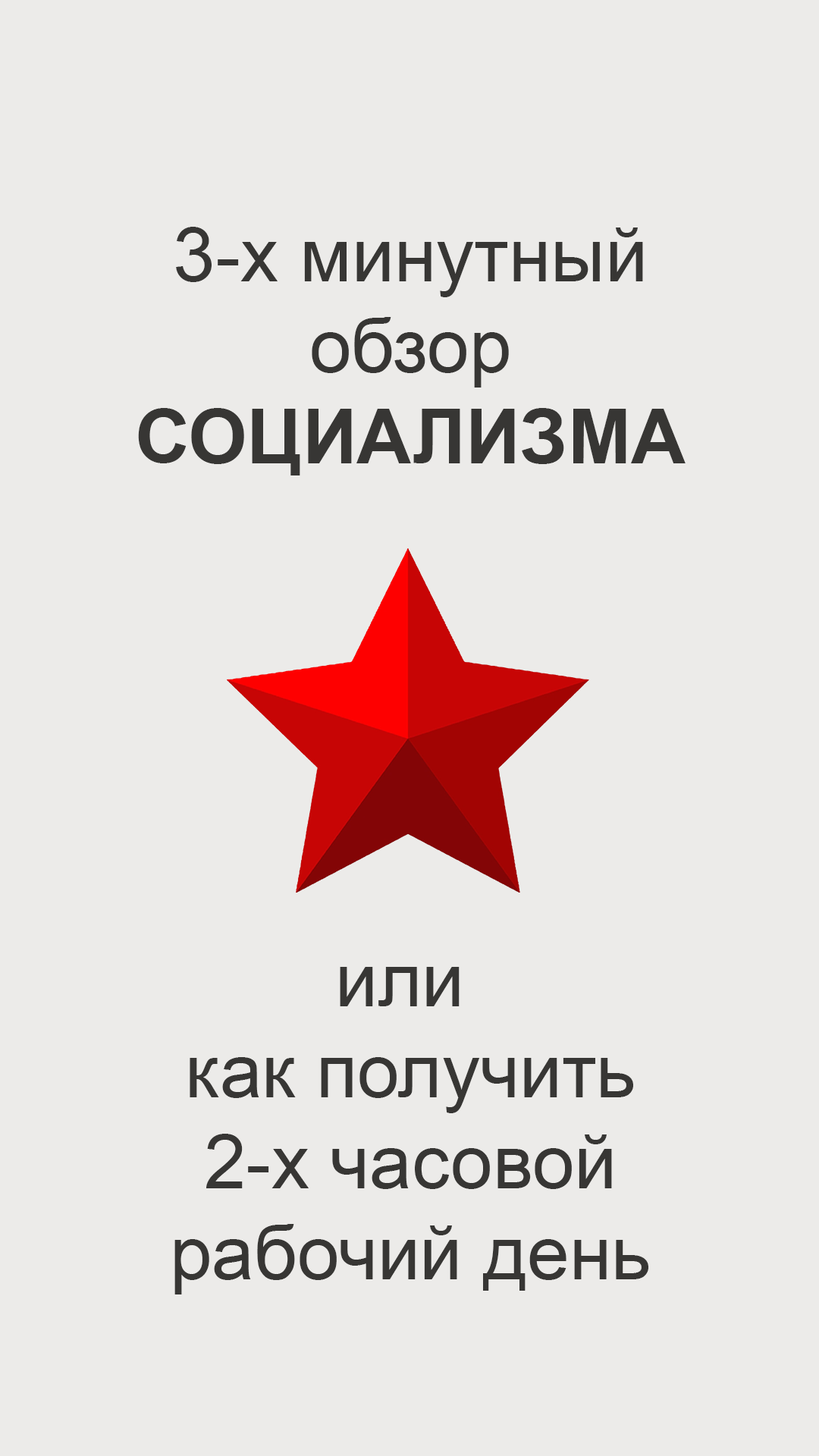
<style>
.page{position:relative;width:819px;height:1456px;background:#ecebe9}
.page>*{position:absolute;margin:0}
.t1{font:75.8px "ArialMT";color:#373634}
.t2{font:75.8px "Arial-BoldMT";color:#373634}
</style>
<div class="page">
<p class="t1" style="left:138px;top:227px;width:548px;height:248px;text-align:center">3-х минутный<br>обзор<br><span class="t2">СОЦИАЛИЗМА</span></p>
<p class="t1" style="left:174px;top:967px;width:474px;height:327px;text-align:center">или <br>как получить<br>2-х часовой<br>рабочий день</p>
</div>
